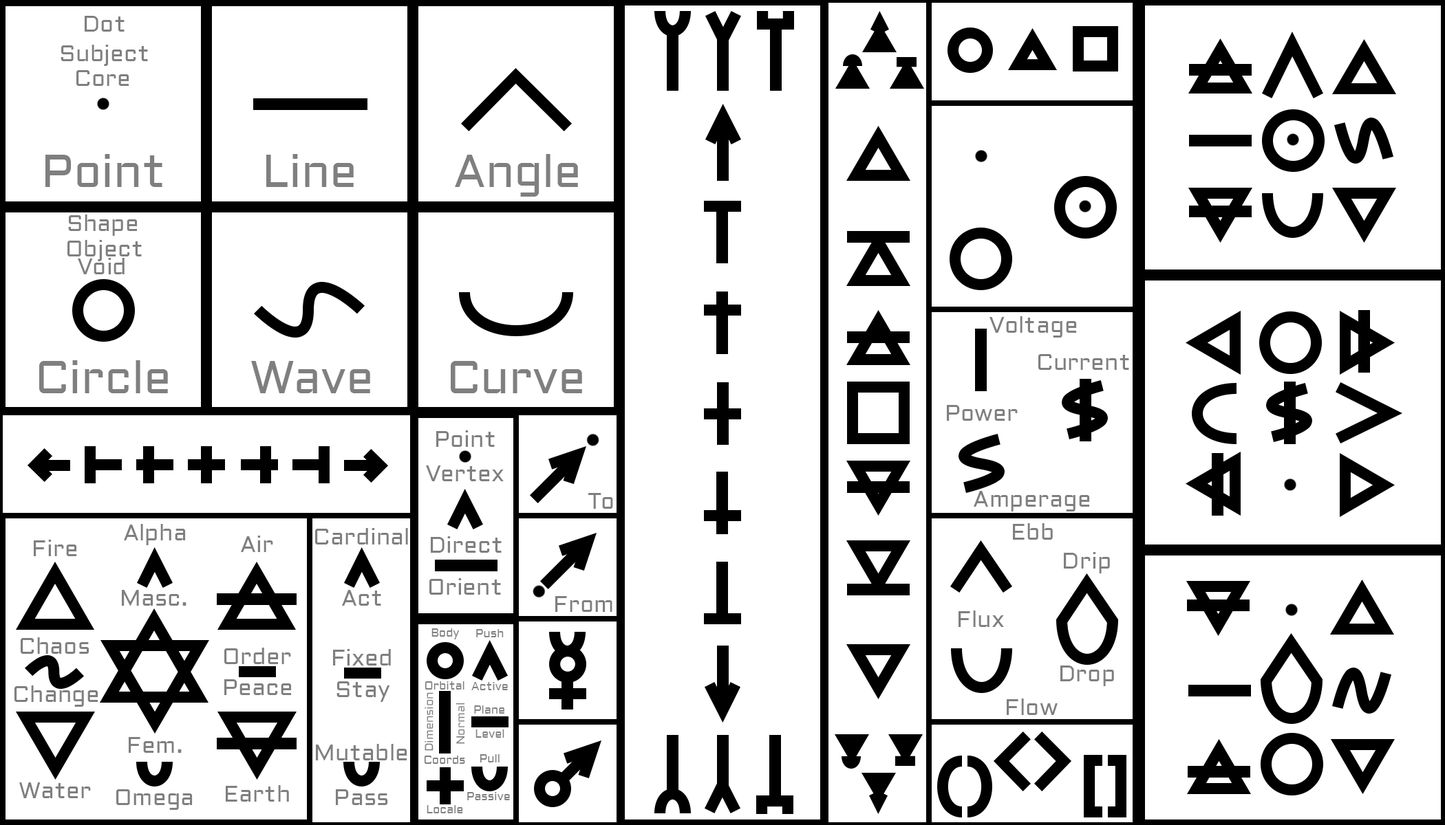
<style>
.page{position:relative;width:1445px;height:825px;background:#ffffff}
.page>*{position:absolute;margin:0}
.t1{font:22.9px "Aldrich-Regular";color:#7f7f7f}
.t2{font:45.9px "Aldrich-Regular";color:#7f7f7f}
.t3{font:11.5px "Aldrich-Regular";color:#7f7f7f}
</style>
<div class="page">
<p class="t1" style="left:85px;top:16px;width:40px;height:16px">Dot</p>
<p class="t1" style="left:61px;top:45px;width:87px;height:21px">Subject</p>
<p class="t1" style="left:76px;top:70px;width:53px;height:16px">Core</p>
<p class="t2" style="left:45px;top:154px;width:117px;height:33px">Point</p>
<p class="t2" style="left:266px;top:154px;width:88px;height:33px">Line</p>
<p class="t2" style="left:455px;top:154px;width:123px;height:43px">Angle</p>
<p class="t1" style="left:68px;top:215px;width:70px;height:21px">Shape</p>
<p class="t1" style="left:67px;top:240px;width:75px;height:21px">Object</p>
<p class="t1" style="left:78px;top:258px;width:47px;height:16px">Void</p>
<p class="t1" style="left:989px;top:316px;width:88px;height:22px">Voltage</p>
<p class="t2" style="left:39px;top:360px;width:129px;height:33px">Circle</p>
<p class="t2" style="left:251px;top:361px;width:119px;height:32px">Wave</p>
<p class="t2" style="left:451px;top:361px;width:131px;height:32px">Curve</p>
<p class="t1" style="left:1038px;top:354px;width:91px;height:16px">Current</p>
<p class="t1" style="left:947px;top:405px;width:70px;height:16px">Power</p>
<p class="t1" style="left:436px;top:431px;width:59px;height:16px">Point</p>
<p class="t1" style="left:426px;top:466px;width:78px;height:16px">Vertex</p>
<p class="t1" style="left:588px;top:493px;width:25px;height:16px">To</p>
<p class="t1" style="left:973px;top:491px;width:117px;height:21px">Amperage</p>
<p class="t1" style="left:124px;top:524px;width:62px;height:21px">Alpha</p>
<p class="t1" style="left:315px;top:528px;width:93px;height:17px">Cardinal</p>
<p class="t1" style="left:1013px;top:523px;width:39px;height:17px">Ebb</p>
<p class="t1" style="left:34px;top:540px;width:43px;height:17px">Fire</p>
<p class="t1" style="left:241px;top:536px;width:32px;height:16px">Air</p>
<p class="t1" style="left:431px;top:537px;width:70px;height:16px">Direct</p>
<p class="t1" style="left:1063px;top:552px;width:47px;height:22px">Drip</p>
<p class="t1" style="left:429px;top:579px;width:72px;height:16px">Orient</p>
<p class="t1" style="left:122px;top:590px;width:64px;height:16px">Masc.</p>
<p class="t1" style="left:342px;top:590px;width:39px;height:16px">Act</p>
<p class="t1" style="left:555px;top:596px;width:57px;height:16px">From</p>
<p class="t1" style="left:958px;top:611px;width:46px;height:16px">Flux</p>
<p class="t3" style="left:431px;top:629px;width:29px;height:11px">Body</p>
<p class="t3" style="left:476px;top:629px;width:28px;height:9px">Push</p>
<p class="t1" style="left:21px;top:638px;width:68px;height:16px">Chaos</p>
<p class="t1" style="left:224px;top:648px;width:67px;height:16px">Order</p>
<p class="t1" style="left:333px;top:649px;width:58px;height:17px">Fixed</p>
<p class="t1" style="left:1060px;top:666px;width:54px;height:21px">Drop</p>
<p class="t1" style="left:14px;top:686px;width:84px;height:21px">Change</p>
<p class="t1" style="left:224px;top:680px;width:68px;height:15px">Peace</p>
<p class="t1" style="left:336px;top:682px;width:54px;height:20px">Stay</p>
<p class="t3" style="left:424px;top:682px;width:40px;height:8px">Orbital</p>
<p class="t3" style="left:471px;top:682px;width:37px;height:9px">Active</p>
<p class="t3" style="left:424px;top:693px;width:9px;height:58px;rotate:-90deg">Dimension</p>
<p class="t1" style="left:1006px;top:699px;width:51px;height:16px">Flow</p>
<p class="t3" style="left:455px;top:703px;width:10px;height:41px;rotate:-90deg">Normal</p>
<p class="t3" style="left:474px;top:706px;width:30px;height:8px">Plane</p>
<p class="t1" style="left:129px;top:737px;width:53px;height:16px">Fem.</p>
<p class="t3" style="left:475px;top:730px;width:29px;height:8px">Level</p>
<p class="t1" style="left:316px;top:744px;width:91px;height:17px">Mutable</p>
<p class="t3" style="left:424px;top:756px;width:41px;height:8px">Coords</p>
<p class="t3" style="left:479px;top:755px;width:20px;height:8px">Pull</p>
<p class="t1" style="left:19px;top:783px;width:72px;height:16px">Water</p>
<p class="t1" style="left:226px;top:786px;width:63px;height:16px">Earth</p>
<p class="t1" style="left:116px;top:790px;width:77px;height:20px">Omega</p>
<p class="t1" style="left:336px;top:790px;width:52px;height:16px">Pass</p>
<p class="t3" style="left:467px;top:792px;width:43px;height:9px">Passive</p>
<p class="t3" style="left:426px;top:806px;width:37px;height:8px">Locale</p>
</div>
